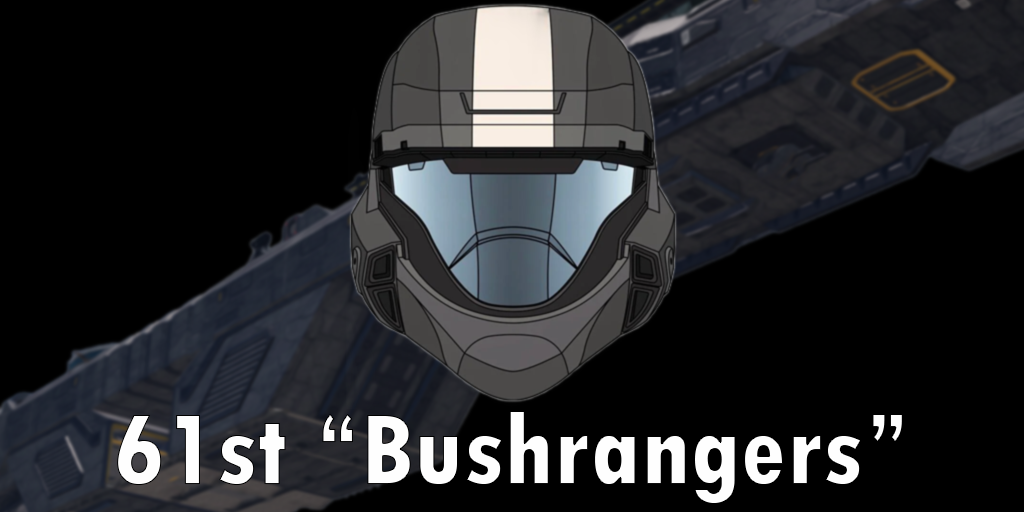
<style>
.page{position:relative;width:1024px;height:512px;background:#000000}
.page>*{position:absolute;margin:0}
.t1{font:106px "TwCenMT-CondensedExtraBold";color:#fefefe}
</style>
<div class="page">
<p class="t1" style="left:117px;top:411px;width:786px;height:93px">61st “Bushrangers”</p>
</div>
